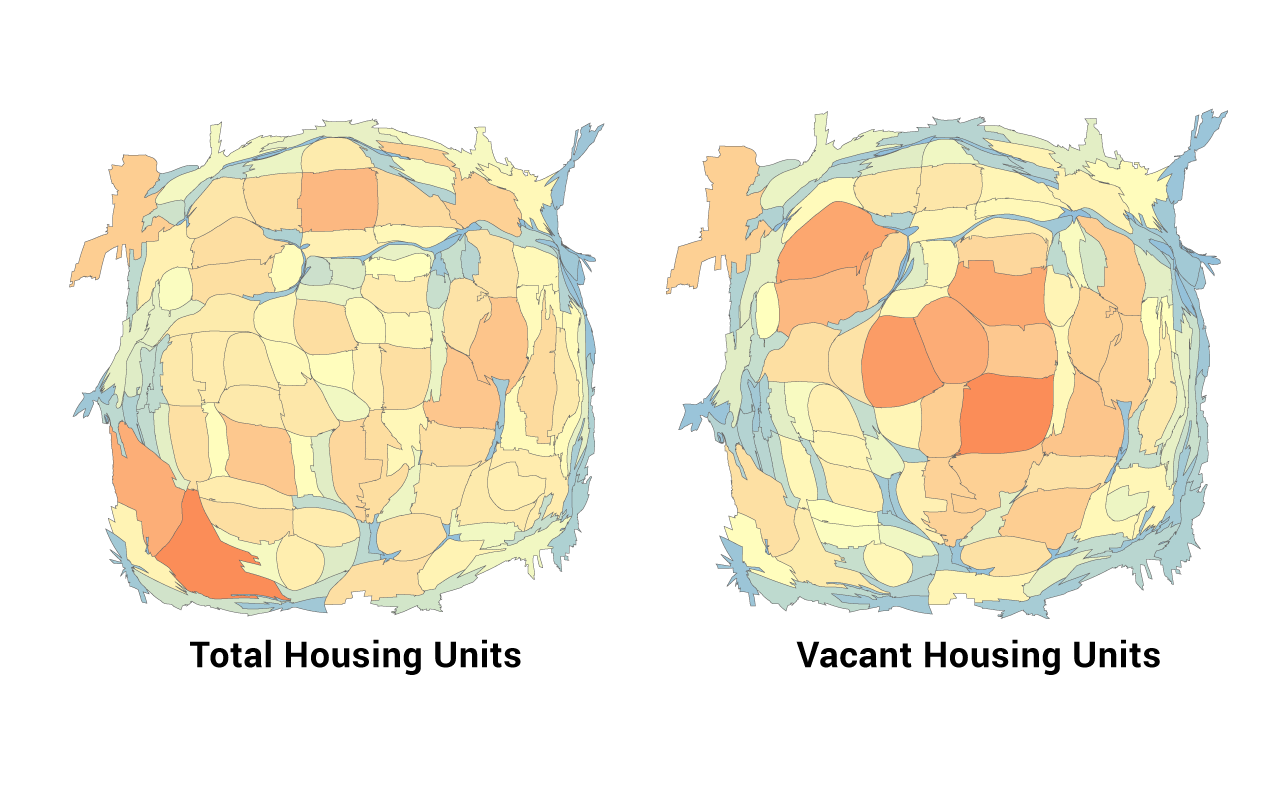
<style>
.page{position:relative;width:1280px;height:800px;background:#ffffff}
.page>*{position:absolute;margin:0}
.t1{font:36px "Roboto-Bold";letter-spacing:0.02em;color:#000000}
</style>
<div class="page">
<p class="t1" style="left:190px;top:639px;width:331px;height:36px">Total Housing Units</p>
<p class="t1" style="left:796px;top:639px;width:364px;height:36px">Vacant Housing Units</p>
</div>
